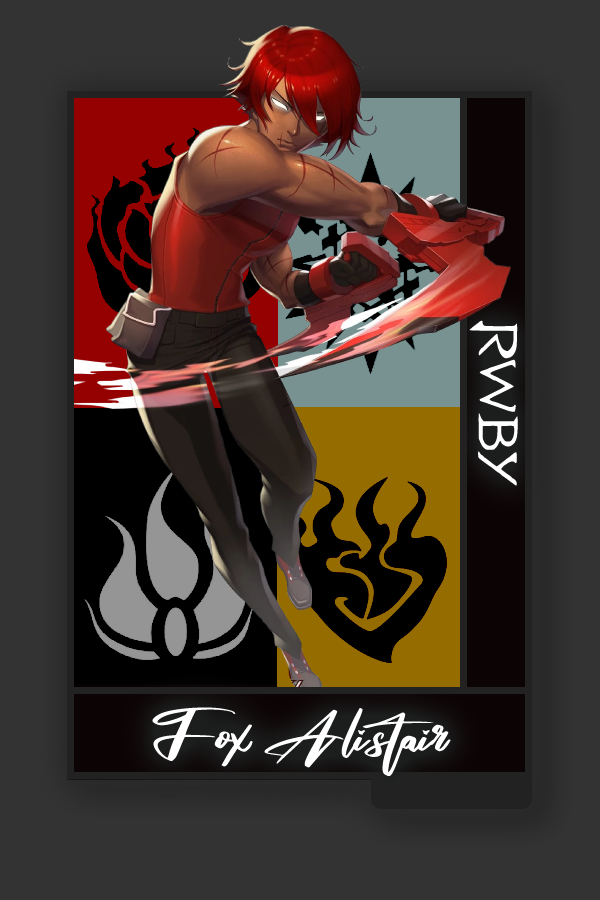
<style>
.page{position:relative;width:600px;height:900px;background:#333333}
.page>*{position:absolute;margin:0}
.t1{font:61.3px "RWBY_Style";color:#ffffff;scale:1.25 1}
.t2{font:75px "RosegaFREE";color:#ffffff}
</style>
<div class="page">
<p class="t1" style="left:469px;top:320px;width:49px;height:166px;rotate:90deg">RWBY</p>
<p class="t2" style="left:151px;top:706px;width:300px;height:71px">Fox Alistair</p>
</div>
